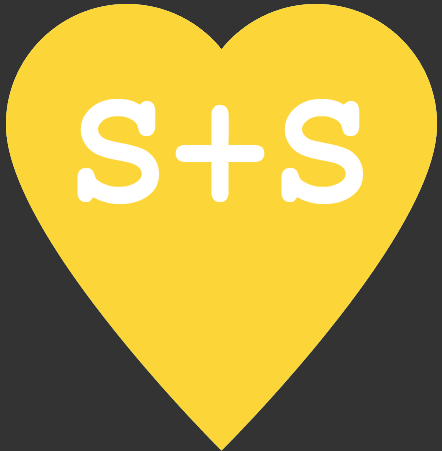
<style>
.page{position:relative;width:442px;height:451px;background:#fcd639}
.page>*{position:absolute;margin:0}
.t1{font:170px "CourierNewPS-BoldMT";color:#ffffff}
</style>
<div class="page">
<p class="t1" style="left:77px;top:99px;width:286px;height:105px">S+S</p>
</div>
